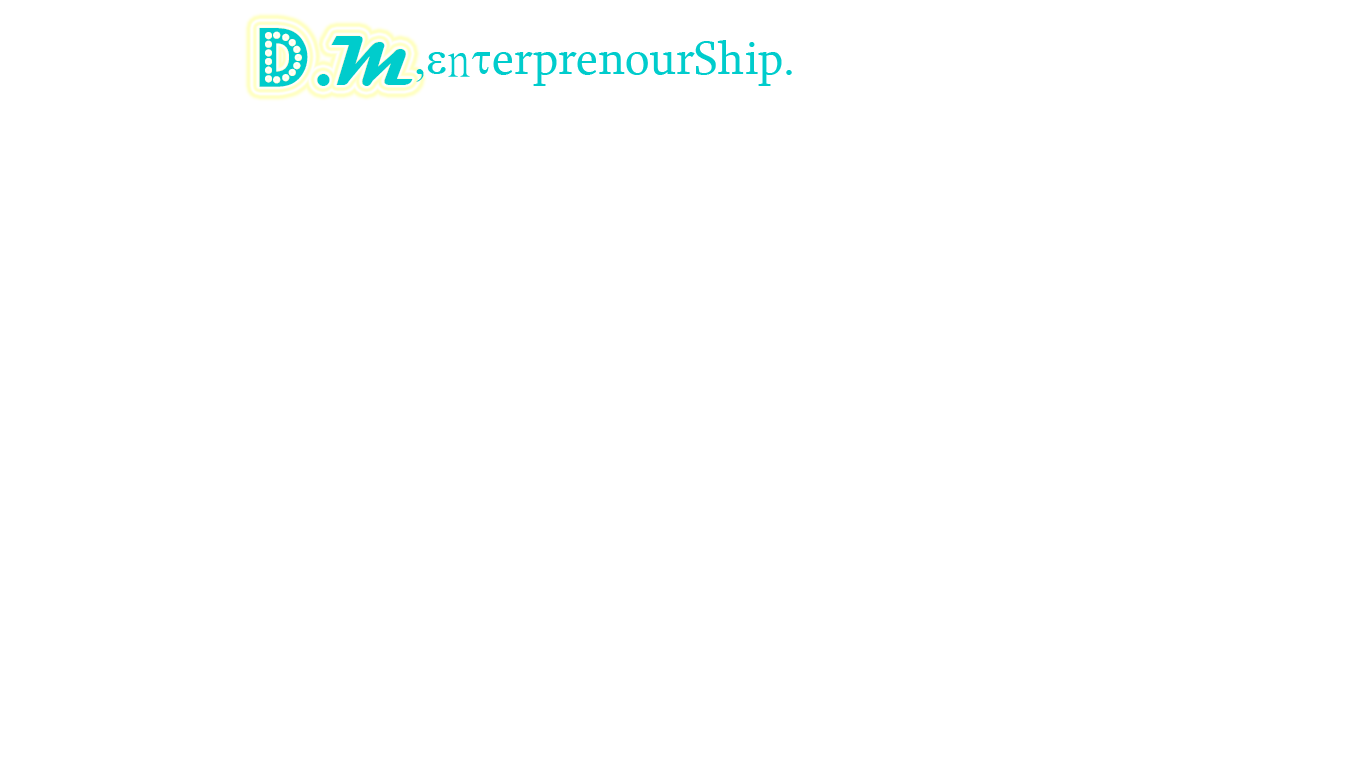
<style>
.page{position:relative;width:1366px;height:768px;background:#ffffff}
.page>*{position:absolute;margin:0}
.t1{font:72px "Magneto-Bold";color:#00cccc}
.t2{font:72px "BudmoJiggler";color:#00cccc}
.t3{font:48px "Sylfaen";color:#00cccc}
.t4{font:48px "SymbolMT";color:#00cccc}
.t5{font:48px "Ming-Lt-HKSCS-ExtB";color:#00cccc}
</style>
<div class="page">
<p class="t1" style="left:259px;top:28px;width:154px;height:59px"><span class="t2">D</span>.M</p>
<p class="t3" style="left:416px;top:40px;width:376px;height:46px"><span class="t4">,e</span><span class="t5">n</span><span class="t4">t</span>erprenourShip.</p>
</div>
